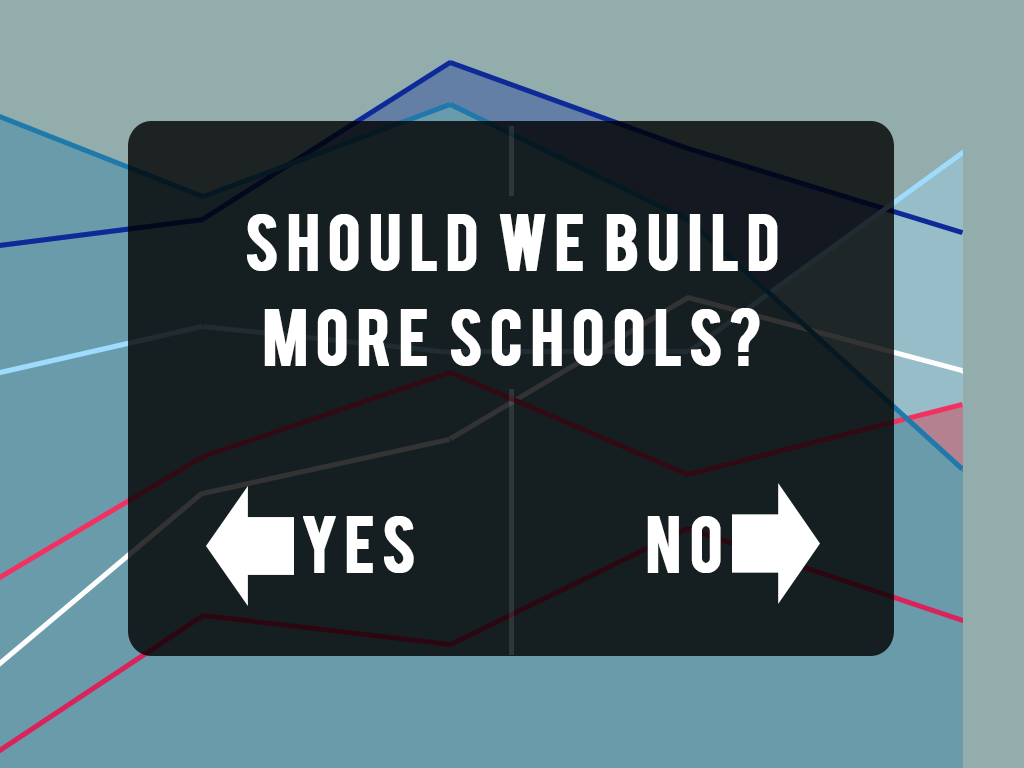
<style>
.page{position:relative;width:1024px;height:768px;background:#151f22}
.page>*{position:absolute;margin:0}
.t1{font:63px/95px "Bebas";letter-spacing:0.08em;color:#ffffff;font-weight:bold}
.t2{font:63px "Bebas";letter-spacing:0.08em;color:#ffffff;font-weight:bold}
</style>
<div class="page">
<p class="t1" style="left:247px;top:214px;width:531px;height:152px;text-align:center">Should we build more schools?</p>
<p class="t2" style="left:303px;top:516px;width:111px;height:57px">YES</p>
<p class="t2" style="left:647px;top:516px;width:74px;height:57px">NO</p>
</div>
